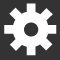
<style>
.page{position:relative;width:60px;height:60px;background:#333333}
.page>*{position:absolute;margin:0}
.t1{font:95px "AppleSymbols";color:#ffffff}
</style>
<div class="page">
<p class="t1" style="left:4px;top:3px;width:53px;height:53px">⚙</p>
</div>
